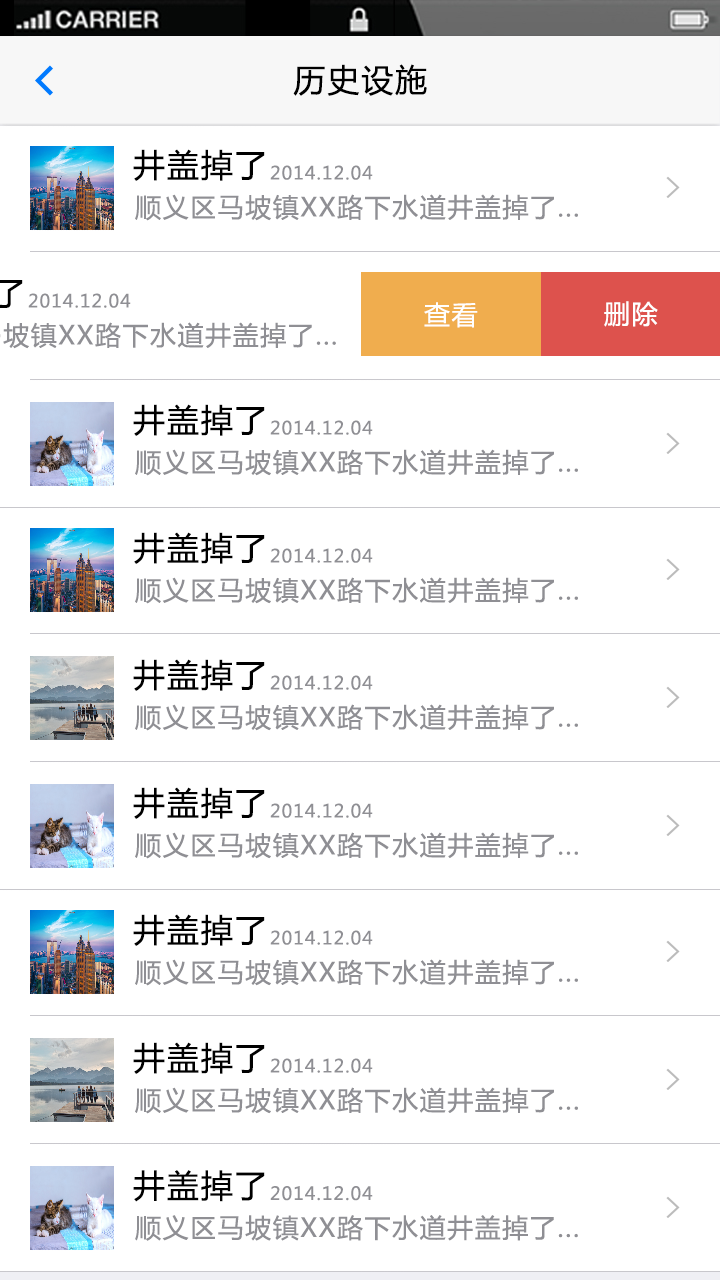
<style>
.page{position:relative;width:720px;height:1280px;background:#ffffff}
.page>*{position:absolute;margin:0}
.t1{font:32px "MicrosoftYaHei";letter-spacing:0.06em;color:#000000}
.t2{font:18px "MicrosoftYaHei";letter-spacing:0.06em;color:#8f8f94}
.t3{font:26px "MicrosoftYaHei";letter-spacing:0.06em;color:#8f8f94}
.t4{font:26px "MicrosoftYaHei";letter-spacing:0.06em;color:#ffffff}
</style>
<div class="page">
<p class="t1" style="left:293px;top:64px;width:134px;height:32px">历史设施</p>
<p class="t1" style="left:133px;top:149px;width:132px;height:32px">井盖掉了</p>
<p class="t2" style="left:270px;top:165px;width:103px;height:15px">2014.12.04</p>
<p class="t3" style="left:135px;top:194px;width:443px;height:27px">顺义区马坡镇XX路下水道井盖掉了...</p>
<p class="t2" style="left:28px;top:293px;width:103px;height:15px">2014.12.04</p>
<p class="t4" style="left:424px;top:302px;width:54px;height:26px">查看</p>
<p class="t4" style="left:604px;top:301px;width:54px;height:26px">删除</p>
<p class="t1" style="left:133px;top:404px;width:132px;height:32px">井盖掉了</p>
<p class="t2" style="left:270px;top:420px;width:103px;height:15px">2014.12.04</p>
<p class="t3" style="left:135px;top:449px;width:443px;height:27px">顺义区马坡镇XX路下水道井盖掉了...</p>
<p class="t1" style="left:133px;top:532px;width:132px;height:32px">井盖掉了</p>
<p class="t2" style="left:270px;top:548px;width:103px;height:15px">2014.12.04</p>
<p class="t3" style="left:135px;top:577px;width:443px;height:27px">顺义区马坡镇XX路下水道井盖掉了...</p>
<p class="t1" style="left:133px;top:659px;width:132px;height:32px">井盖掉了</p>
<p class="t2" style="left:270px;top:675px;width:103px;height:15px">2014.12.04</p>
<p class="t3" style="left:135px;top:704px;width:443px;height:27px">顺义区马坡镇XX路下水道井盖掉了...</p>
<p class="t1" style="left:133px;top:787px;width:132px;height:32px">井盖掉了</p>
<p class="t2" style="left:270px;top:803px;width:103px;height:15px">2014.12.04</p>
<p class="t3" style="left:135px;top:832px;width:443px;height:27px">顺义区马坡镇XX路下水道井盖掉了...</p>
<p class="t1" style="left:133px;top:914px;width:132px;height:32px">井盖掉了</p>
<p class="t2" style="left:270px;top:930px;width:103px;height:15px">2014.12.04</p>
<p class="t3" style="left:135px;top:959px;width:443px;height:27px">顺义区马坡镇XX路下水道井盖掉了...</p>
<p class="t1" style="left:133px;top:1042px;width:132px;height:32px">井盖掉了</p>
<p class="t2" style="left:270px;top:1058px;width:103px;height:15px">2014.12.04</p>
<p class="t3" style="left:135px;top:1087px;width:443px;height:27px">顺义区马坡镇XX路下水道井盖掉了...</p>
<p class="t1" style="left:133px;top:1170px;width:132px;height:32px">井盖掉了</p>
<p class="t2" style="left:270px;top:1186px;width:103px;height:15px">2014.12.04</p>
<p class="t3" style="left:135px;top:1215px;width:443px;height:26px">顺义区马坡镇XX路下水道井盖掉了...</p>
</div>
